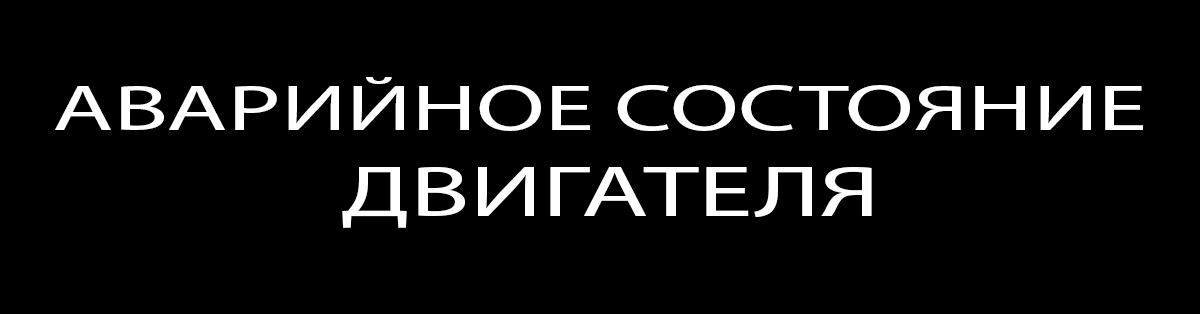
<style>
.page{position:relative;width:1200px;height:314px;background:#000000}
.page>*{position:absolute;margin:0}
.t1{font:65px "MyriadPro-Regular";color:#ffffff;scale:1.53 1}
.t2{font:72px "MyriadPro-Regular";color:#ffffff;scale:1.53 1}
</style>
<div class="page">
<p class="t1" style="left:55px;top:77px;width:1088px;height:151px;text-align:center">АВАРИЙНОЕ СОСТОЯНИЕ<br> <span class="t2">ДВИГАТЕЛЯ</span></p>
</div>
